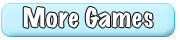
<style>
.page{position:relative;width:180px;height:40px;background:#ffffff}
.page>*{position:absolute;margin:0}
.t1{font:24px "MarkerFelt-Wide";color:#ffffff}
</style>
<div class="page">
<p class="t1" style="left:23px;top:7px;width:130px;height:21px">More Games</p>
</div>
